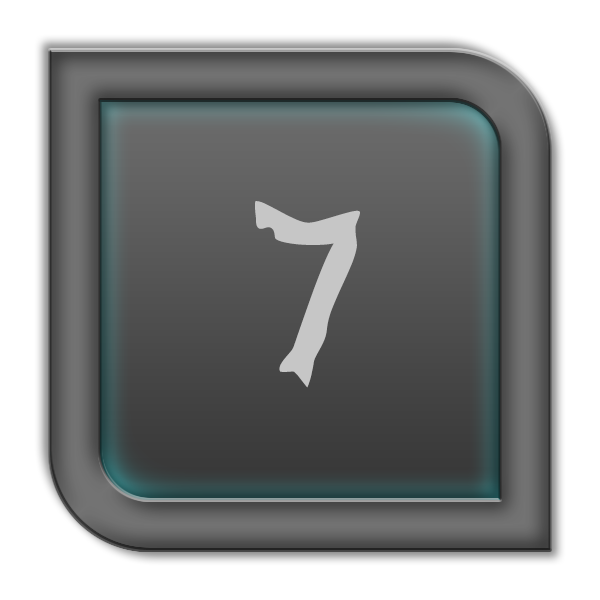
<style>
.page{position:relative;width:600px;height:600px;background:#ffffff}
.page>*{position:absolute;margin:0}
.t1{font:300px "WILD2GhixmNC";color:#c6c6c6;scale:0.83 1}
</style>
<div class="page">
<p class="t1" style="left:255px;top:201px;width:105px;height:187px">7</p>
</div>
